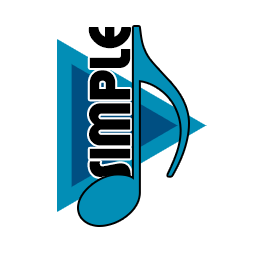
<style>
.page{position:relative;width:256px;height:256px;background:#ffffff}
.page>*{position:absolute;margin:0}
.t1{font:56.3px "XpressHeavySFBold";color:#000000}
</style>
<div class="page">
<p class="t1" style="left:88px;top:27px;width:43px;height:152px;rotate:-90deg">SIMPLE</p>
</div>
